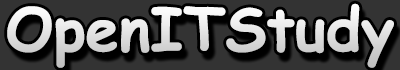
<style>
.page{position:relative;width:400px;height:70px;background:#333333}
.page>*{position:absolute;margin:0}
.t1{font:60px "ComicSansMS-Bold";color:#e3e3e3}
</style>
<div class="page">
<p class="t1" style="left:7px;top:3px;width:387px;height:65px">OpenITStudy</p>
<p class="t1" style="left:7px;top:3px;width:387px;height:65px">OpenITStudy</p>
</div>
